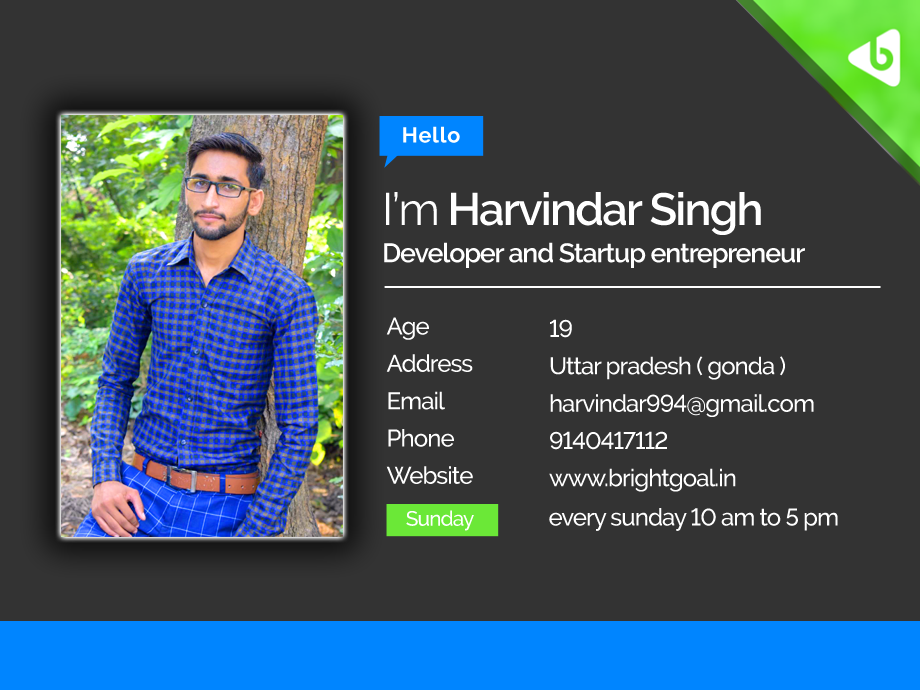
<style>
.page{position:relative;width:920px;height:690px;background:#333333}
.page>*{position:absolute;margin:0}
.t1{font:21.3px "Raleway-Bold";letter-spacing:0.04em;color:#ffffff}
.t2{font:26.7px/37.3px "Raleway-SemiBold";letter-spacing:-0.04em;color:#ffffff}
.t3{font:45.3px/37.3px "Raleway-Regular";letter-spacing:-0.04em;color:#ffffff}
.t4{font:45.3px/37.3px "Raleway-SemiBold";letter-spacing:-0.04em;color:#ffffff}
.t5{font:24px/37.3px "Raleway-Medium";letter-spacing:-0.04em;color:#ffffff}
.t6{font:20.7px "Raleway-Medium";letter-spacing:-0.04em;color:#ffffff}
.t7{font:24px "Raleway-Medium";letter-spacing:-0.04em;color:#ffffff}
</style>
<div class="page">
<p class="t1" style="left:403px;top:126px;width:57px;height:17px">Hello</p>
<p class="t2" style="left:384px;top:192px;width:421px;height:76px"><span class="t3">I’m</span><span class="t4"> Harvindar Singh<br></span>Developer and Startup entrepreneur</p>
<p class="t5" style="left:386px;top:317px;width:87px;height:167px">Age<br>Address<br>Email<br>Phone<br>Website</p>
<p class="t5" style="left:549px;top:319px;width:265px;height:173px">19<br>Uttar pradesh ( gonda )<br>harvindar994@gmail.com<br>9140417112<br>www.brightgoal.in</p>
<p class="t6" style="left:406px;top:510px;width:68px;height:21px">Sunday</p>
<p class="t7" style="left:549px;top:508px;width:289px;height:23px">every sunday 10 am to 5 pm</p>
</div>
